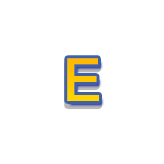
<style>
.page{position:relative;width:164px;height:164px;background:#ffffff}
.page>*{position:absolute;margin:0}
.t1{font:59.8px "PingFangHK-Semibold";color:#ffc600;text-transform:uppercase}
</style>
<div class="page">
<p class="t1" style="left:67px;top:58px;width:32px;height:43px">e</p>
</div>
